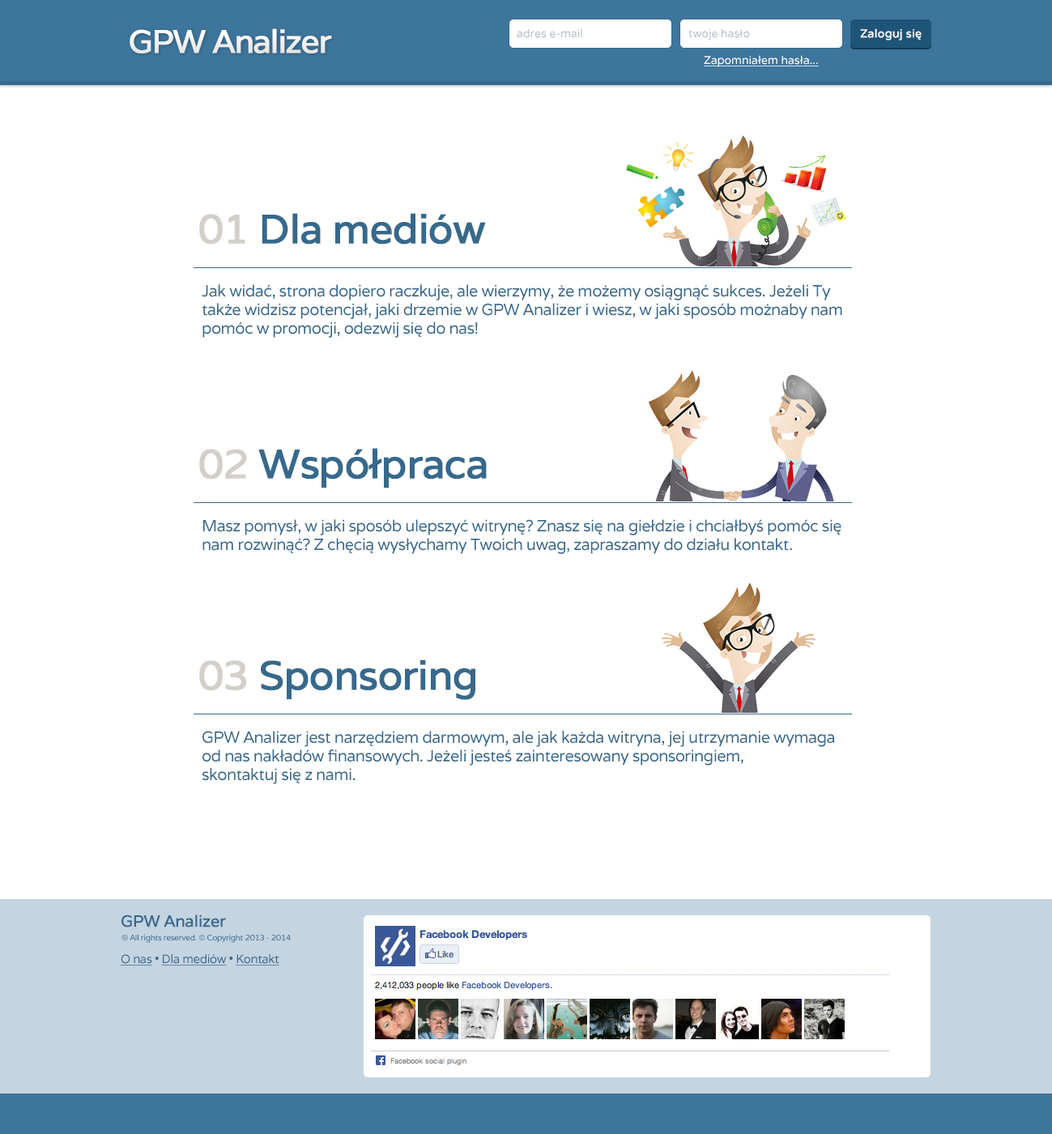
<style>
.page{position:relative;width:1052px;height:1134px;background:#ffffff}
.page>*{position:absolute;margin:0}
.t1{font:32.4px "Varela";letter-spacing:-0.05em;color:#ffffff;font-weight:bold}
.t2{font:11.3px "Varela";color:#b1beca}
.t3{font:11.3px "Varela";color:#ffffff;font-weight:bold}
.t4{font:11.3px "Varela";color:#ffffff;text-decoration:underline}
.t5{font:40.5px "Varela";letter-spacing:-0.03em;color:#37698c;font-weight:bold}
.t6{font:40.5px "Varela";letter-spacing:-0.03em;color:#d3cfc9;font-weight:bold}
.t7{font:16.2px/18.6px "Varela";letter-spacing:-0.03em;color:#37698c}
.t8{font:16.2px "Varela";letter-spacing:-0.03em;color:#37698c;font-weight:bold}
.t9{font:8.1px "Varela";letter-spacing:-0.03em;color:#37698c}
.t10{font:12.1px "Varela";letter-spacing:-0.03em;color:#37698c;text-decoration:underline}
.t11{font:12.1px "Varela";letter-spacing:-0.03em;color:#37698c}
</style>
<div class="page">
<p class="t1" style="left:130px;top:28px;width:202px;height:25px">GPW Analizer</p>
<p class="t2" style="left:517px;top:28px;width:65px;height:10px">adres e-mail</p>
<p class="t2" style="left:688px;top:28px;width:62px;height:12px">twoje hasło</p>
<p class="t3" style="left:860px;top:28px;width:61px;height:12px">Zaloguj się</p>
<p class="t4" style="left:704px;top:55px;width:115px;height:12px">Zapomniałem hasła...</p>
<p class="t5" style="left:199px;top:213px;width:287px;height:32px"><span class="t6">01</span> Dla mediów</p>
<p class="t7" style="left:202px;top:284px;width:640px;height:54px">Jak widać, strona dopiero raczkuje, ale wierzymy, że możemy osiągnąć sukces. Jeżeli Ty także widzisz potencjał, jaki drzemie w GPW Analizer i wiesz, w jaki sposób możnaby nam pomóc w promocji, odezwij się do nas!</p>
<p class="t5" style="left:199px;top:448px;width:288px;height:40px"><span class="t6">02</span> Współpraca</p>
<p class="t7" style="left:202px;top:519px;width:639px;height:35px">Masz pomysł, w jaki sposób ulepszyć witrynę? Znasz się na giełdzie i chciałbyś pomóc się nam rozwinąć? Z chęcią wysłychamy Twoich uwag, zapraszamy do działu kontakt.</p>
<p class="t5" style="left:199px;top:660px;width:276px;height:40px"><span class="t6">03 </span>Sponsoring</p>
<p class="t7" style="left:202px;top:730px;width:632px;height:54px">GPW Analizer jest narzędziem darmowym, ale jak każda witryna, jej utrzymanie wymaga od nas nakładów finansowych. Jeżeli jesteś zainteresowany sponsoringiem, <br>skontaktuj się z nami.</p>
<p class="t8" style="left:121px;top:914px;width:105px;height:13px">GPW Analizer</p>
<p class="t9" style="left:121px;top:934px;width:170px;height:9px">® All rights reserved. © Copyright 2013 - 2014</p>
<p class="t10" style="left:121px;top:954px;width:158px;height:11px">O nas<span class="t11"> • </span>Dla mediów<span class="t11"> • </span>Kontakt</p>
</div>
